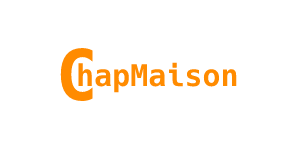
<style>
.page{position:relative;width:297px;height:152px;background:#ffffff}
.page>*{position:absolute;margin:0}
.t1{font:70px "Hack-Bold";color:#ff8b00}
.t2{font:30px "Hack-Bold";color:#ff8b00}
</style>
<div class="page">
<p class="t1" style="left:60px;top:48px;width:33px;height:53px">C</p>
<p class="t2" style="left:78px;top:62px;width:159px;height:31px">hapMaison</p>
</div>
